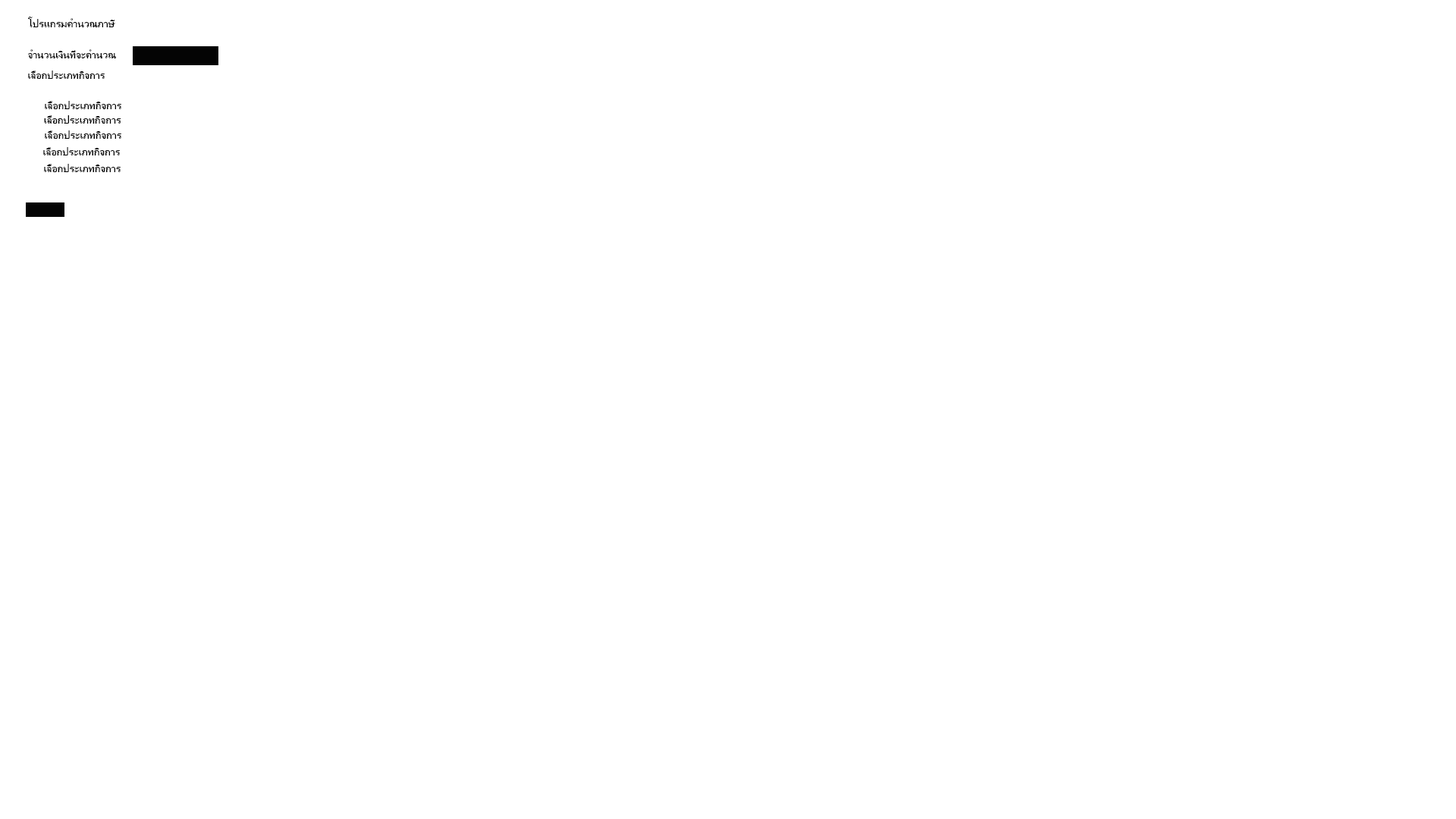
<style>
.page{position:relative;width:1456px;height:819px;background:#ffffff}
.page>*{position:absolute;margin:0}
.t1{font:10.6px "MicrosoftSansSerif";color:#000000}
</style>
<div class="page">
<p class="t1" style="left:28px;top:17px;width:87px;height:10px">โปรแกรมคำนวณภาษี</p>
<p class="t1" style="left:28px;top:49px;width:88px;height:9px">จำนวนเงินที่จะคำนวณ</p>
<p class="t1" style="left:28px;top:71px;width:77px;height:8px">เลือกประเภทกิจการ</p>
<p class="t1" style="left:45px;top:101px;width:77px;height:8px">เลือกประเภทกิจการ</p>
<p class="t1" style="left:44px;top:115px;width:77px;height:9px">เลือกประเภทกิจการ</p>
<p class="t1" style="left:45px;top:130px;width:77px;height:9px">เลือกประเภทกิจการ</p>
<p class="t1" style="left:43px;top:147px;width:78px;height:8px">เลือกประเภทกิจการ</p>
<p class="t1" style="left:44px;top:164px;width:77px;height:8px">เลือกประเภทกิจการ</p>
</div>
